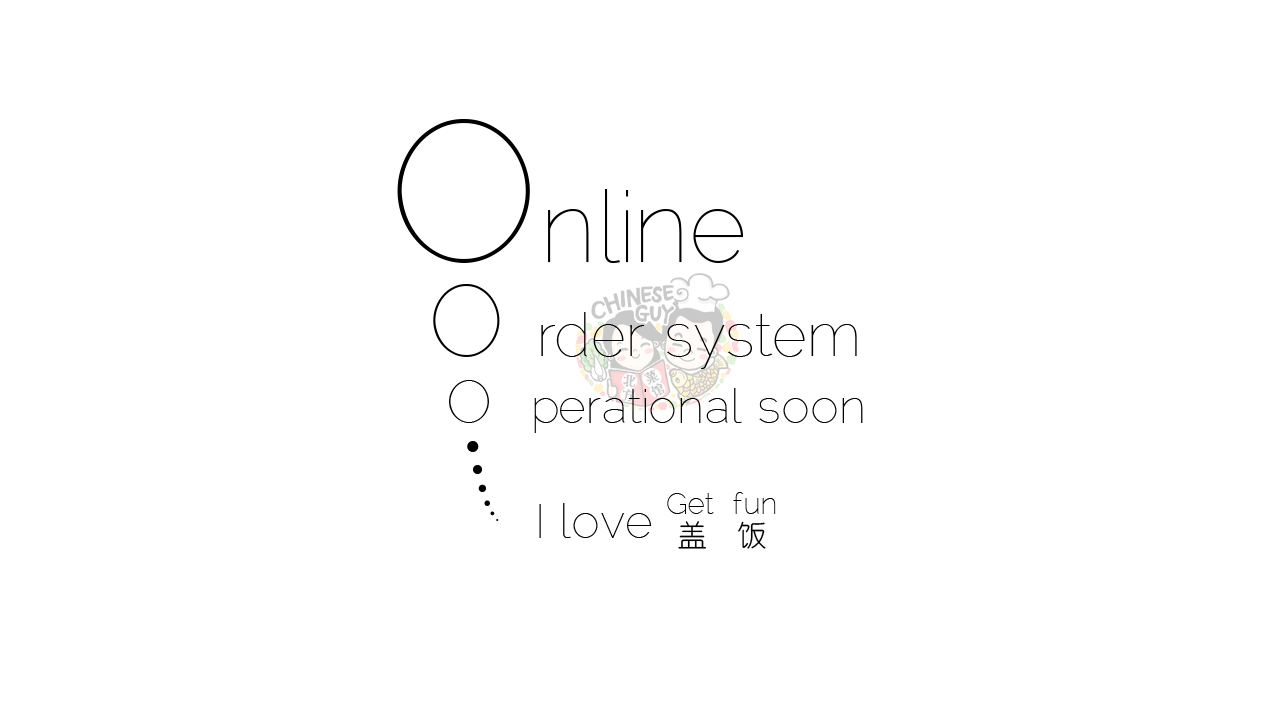
<style>
.page{position:relative;width:1280px;height:720px;background:#ffffff}
.page>*{position:absolute;margin:0}
.t1{font:100px "Raleway-Thin";color:#000000}
.t2{font:200px "Raleway-Thin";color:#000000}
.t3{font:60px "Raleway-Thin";color:#000000}
.t4{font:48px "Raleway-Thin";color:#000000}
.t5{font:150px "MicrosoftHimalaya";color:#000000}
.t6{font:125px "MicrosoftHimalaya";color:#000000}
.t7{font:100px "MicrosoftHimalaya";color:#000000}
.t8{font:75px "MicrosoftHimalaya";color:#000000}
.t9{font:50px "MicrosoftHimalaya";color:#000000}
.t10{font:25px "MicrosoftHimalaya";color:#000000}
.t11{font:30px "Raleway-Thin";color:#000000}
.t12{font:30px "YouYuan";color:#000000}
</style>
<div class="page">
<p class="t1" style="left:397px;top:118px;width:347px;height:145px"><span class="t2">O</span>nline</p>
<p class="t3" style="left:433px;top:284px;width:424px;height:85px"><span class="t1">O </span>rder system</p>
<p class="t4" style="left:449px;top:380px;width:414px;height:53px"><span class="t3">O  </span>perational soon</p>
<p class="t5" style="left:467px;top:441px;width:32px;height:80px">.<span class="t6">.</span><span class="t7">.</span><span class="t8">.</span><span class="t9">.</span><span class="t10">.</span></p>
<p class="t11" style="left:667px;top:492px;width:109px;height:22px">Get  fun</p>
<p class="t4" style="left:539px;top:503px;width:112px;height:35px">I love</p>
<p class="t12" style="left:678px;top:521px;width:88px;height:28px">盖  饭</p>
</div>
